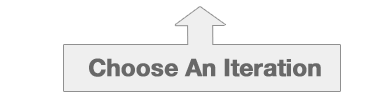
<style>
.page{position:relative;width:390px;height:100px;background:#ffffff}
.page>*{position:absolute;margin:0}
.t1{font:24px "HelveticaNeue-Bold";letter-spacing:-0.015em;color:#686868;font-weight:bold}
</style>
<div class="page">
<p class="t1" style="left:89px;top:58px;width:232px;height:19px">Choose An Iteration</p>
</div>
